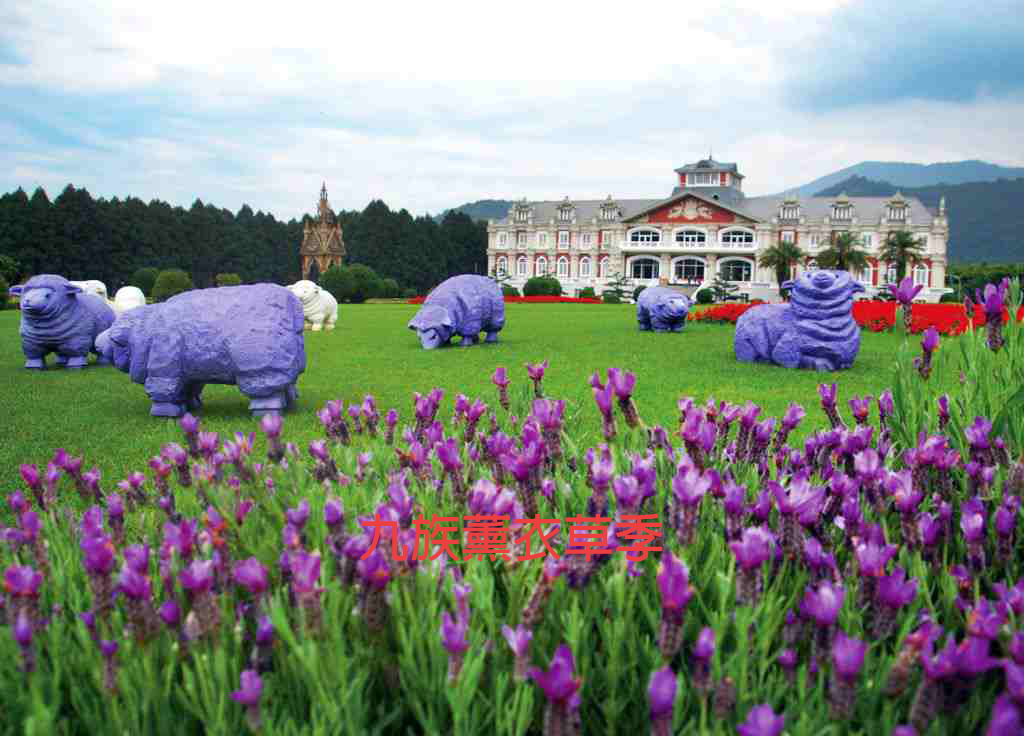
<style>
.page{position:relative;width:1024px;height:736px}
.page>*{position:absolute;margin:0}
.t1{font:51px "AdobeFanHeitiStd-Bold";color:#ec3f3f}
</style>
<div class="page">
<p class="t1" style="left:360px;top:513px;width:303px;height:49px">九族薰衣草季</p>
</div>
